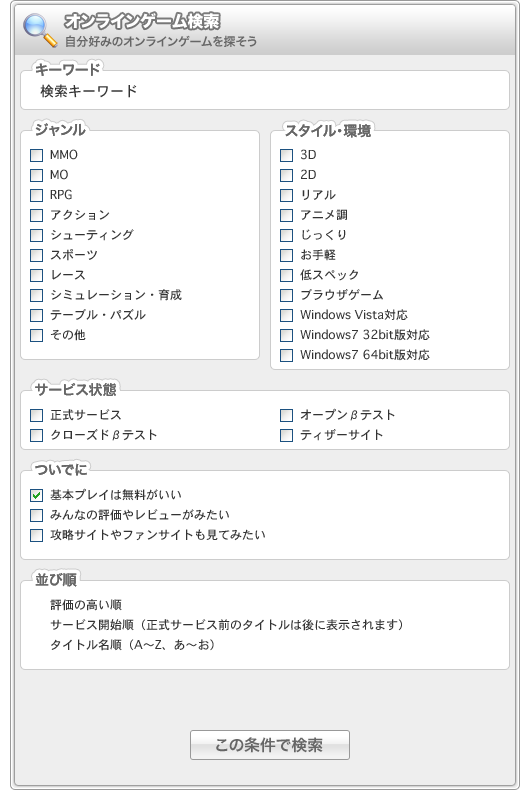
<style>
.page{position:relative;width:530px;height:800px;background:#ffffff}
.page>*{position:absolute;margin:0}
.t1{font:16px "HiraKakuStd-W8";color:#ffffff}
.t2{font:12px "HiraKakuPro-W6";color:#666666}
.t3{font:14px "HiraKakuPro-W6";color:#666666}
.t4{font:14px "Osaka";color:#333333}
.t5{font:12px/20px "Osaka";color:#333333}
.t6{font:16px "HiraKakuPro-W6";color:#666666}
</style>
<div class="page">
<p class="t1" style="left:65px;top:13px;width:154px;height:16px">オンラインゲーム検索</p>
<p class="t2" style="left:66px;top:35px;width:191px;height:12px">自分好みのオンラインゲームを探そう</p>
<p class="t3" style="left:36px;top:63px;width:64px;height:13px">キーワード</p>
<p class="t3" style="left:36px;top:63px;width:64px;height:13px">キーワード</p>
<p class="t3" style="left:36px;top:63px;width:64px;height:13px">キーワード</p>
<p class="t4" style="left:40px;top:84px;width:97px;height:14px">検索キーワード</p>
<p class="t3" style="left:35px;top:123px;width:51px;height:13px">ジャンル</p>
<p class="t3" style="left:35px;top:123px;width:51px;height:13px">ジャンル</p>
<p class="t3" style="left:35px;top:123px;width:51px;height:13px">ジャンル</p>
<p class="t3" style="left:285px;top:124px;width:86px;height:14px">スタイル・環境</p>
<p class="t3" style="left:285px;top:124px;width:86px;height:14px">スタイル・環境</p>
<p class="t3" style="left:285px;top:124px;width:86px;height:14px">スタイル・環境</p>
<p class="t5" style="left:50px;top:149px;width:132px;height:192px">MMO<br>MO<br>RPG<br>アクション<br>シューティング<br>スポーツ<br>レース<br>シミュレーション・育成<br>テーブル・パズル<br>その他</p>
<p class="t5" style="left:300px;top:149px;width:130px;height:212px">3D<br>2D<br>リアル<br>アニメ調<br>じっくり<br>お手軽<br>低スペック<br>ブラウザゲーム<br>Windows Vista対応<br>Windows7 32bit版対応<br>Windows7 64bit版対応</p>
<p class="t3" style="left:35px;top:383px;width:81px;height:13px">サービス状態</p>
<p class="t3" style="left:35px;top:383px;width:81px;height:13px">サービス状態</p>
<p class="t3" style="left:35px;top:383px;width:81px;height:13px">サービス状態</p>
<p class="t5" style="left:50px;top:409px;width:107px;height:32px">正式サービス<br>クローズドβテスト</p>
<p class="t5" style="left:300px;top:408px;width:95px;height:33px">オープンβテスト<br>ティザーサイト</p>
<p class="t3" style="left:35px;top:463px;width:52px;height:13px">ついでに</p>
<p class="t3" style="left:35px;top:463px;width:52px;height:13px">ついでに</p>
<p class="t3" style="left:35px;top:463px;width:52px;height:13px">ついでに</p>
<p class="t5" style="left:50px;top:488px;width:215px;height:53px">基本プレイは無料がいい<br>みんなの評価やレビューがみたい<br>攻略サイトやファンサイトも見てみたい</p>
<p class="t3" style="left:35px;top:573px;width:42px;height:14px">並び順</p>
<p class="t3" style="left:35px;top:573px;width:42px;height:14px">並び順</p>
<p class="t3" style="left:35px;top:573px;width:42px;height:14px">並び順</p>
<p class="t5" style="left:50px;top:599px;width:352px;height:52px">評価の高い順<br>サービス開始順（正式サービス前のタイトルは後に表示されます）<br>タイトル名順（A〜Z、あ〜お）</p>
<p class="t6" style="left:216px;top:737px;width:107px;height:16px">この条件で検索</p>
</div>
